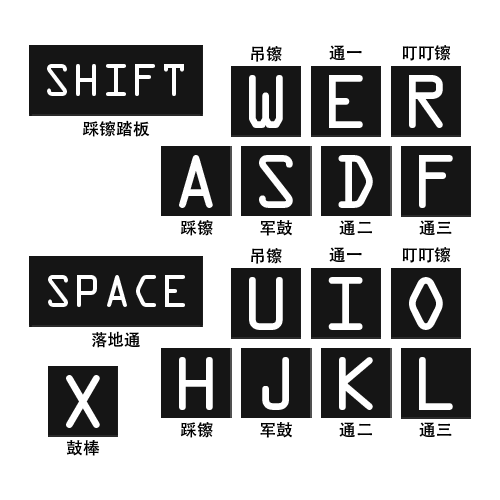
<style>
.page{position:relative;width:500px;height:500px;background:#ffffff}
.page>*{position:absolute;margin:0}
.t1{font:16.7px "AdobeHeitiStd-Regular";color:#000000}
.t2{font:40.7px "OCRAStd";color:#ffffff}
.t3{font:68.5px "OCRAStd";color:#ffffff}
</style>
<div class="page">
<p class="t1" style="left:251px;top:46px;width:31px;height:16px">吊镲</p>
<p class="t1" style="left:329px;top:45px;width:33px;height:15px">通一</p>
<p class="t1" style="left:402px;top:45px;width:49px;height:16px">叮叮镲</p>
<p class="t2" style="left:47px;top:64px;width:137px;height:32px">SHIFT</p>
<p class="t3" style="left:249px;top:75px;width:34px;height:53px">W</p>
<p class="t3" style="left:329px;top:75px;width:34px;height:53px">E</p>
<p class="t3" style="left:409px;top:75px;width:34px;height:53px">R</p>
<p class="t1" style="left:82px;top:120px;width:68px;height:17px">踩镲踏板</p>
<p class="t3" style="left:179px;top:155px;width:34px;height:53px">A</p>
<p class="t3" style="left:259px;top:155px;width:34px;height:53px">S</p>
<p class="t3" style="left:338px;top:155px;width:35px;height:53px">D</p>
<p class="t3" style="left:419px;top:155px;width:34px;height:53px">F</p>
<p class="t1" style="left:180px;top:220px;width:33px;height:16px">踩镲</p>
<p class="t1" style="left:260px;top:220px;width:32px;height:16px">军鼓</p>
<p class="t1" style="left:339px;top:220px;width:33px;height:15px">通二</p>
<p class="t1" style="left:419px;top:220px;width:33px;height:15px">通三</p>
<p class="t1" style="left:251px;top:248px;width:31px;height:16px">吊镲</p>
<p class="t1" style="left:329px;top:247px;width:33px;height:15px">通一</p>
<p class="t1" style="left:402px;top:247px;width:49px;height:16px">叮叮镲</p>
<p class="t2" style="left:48px;top:275px;width:137px;height:32px">SPACE</p>
<p class="t3" style="left:249px;top:277px;width:34px;height:53px">U</p>
<p class="t3" style="left:328px;top:277px;width:35px;height:53px">I</p>
<p class="t3" style="left:409px;top:277px;width:34px;height:53px">O</p>
<p class="t1" style="left:92px;top:331px;width:48px;height:17px">落地通</p>
<p class="t3" style="left:179px;top:357px;width:34px;height:53px">H</p>
<p class="t3" style="left:262px;top:357px;width:27px;height:53px">J</p>
<p class="t3" style="left:339px;top:357px;width:34px;height:53px">K</p>
<p class="t3" style="left:419px;top:357px;width:34px;height:53px">L</p>
<p class="t3" style="left:66px;top:375px;width:34px;height:53px">X</p>
<p class="t1" style="left:180px;top:422px;width:33px;height:16px">踩镲</p>
<p class="t1" style="left:260px;top:422px;width:32px;height:16px">军鼓</p>
<p class="t1" style="left:339px;top:422px;width:33px;height:15px">通二</p>
<p class="t1" style="left:419px;top:422px;width:33px;height:15px">通三</p>
<p class="t1" style="left:66px;top:440px;width:34px;height:16px">鼓棒</p>
</div>
